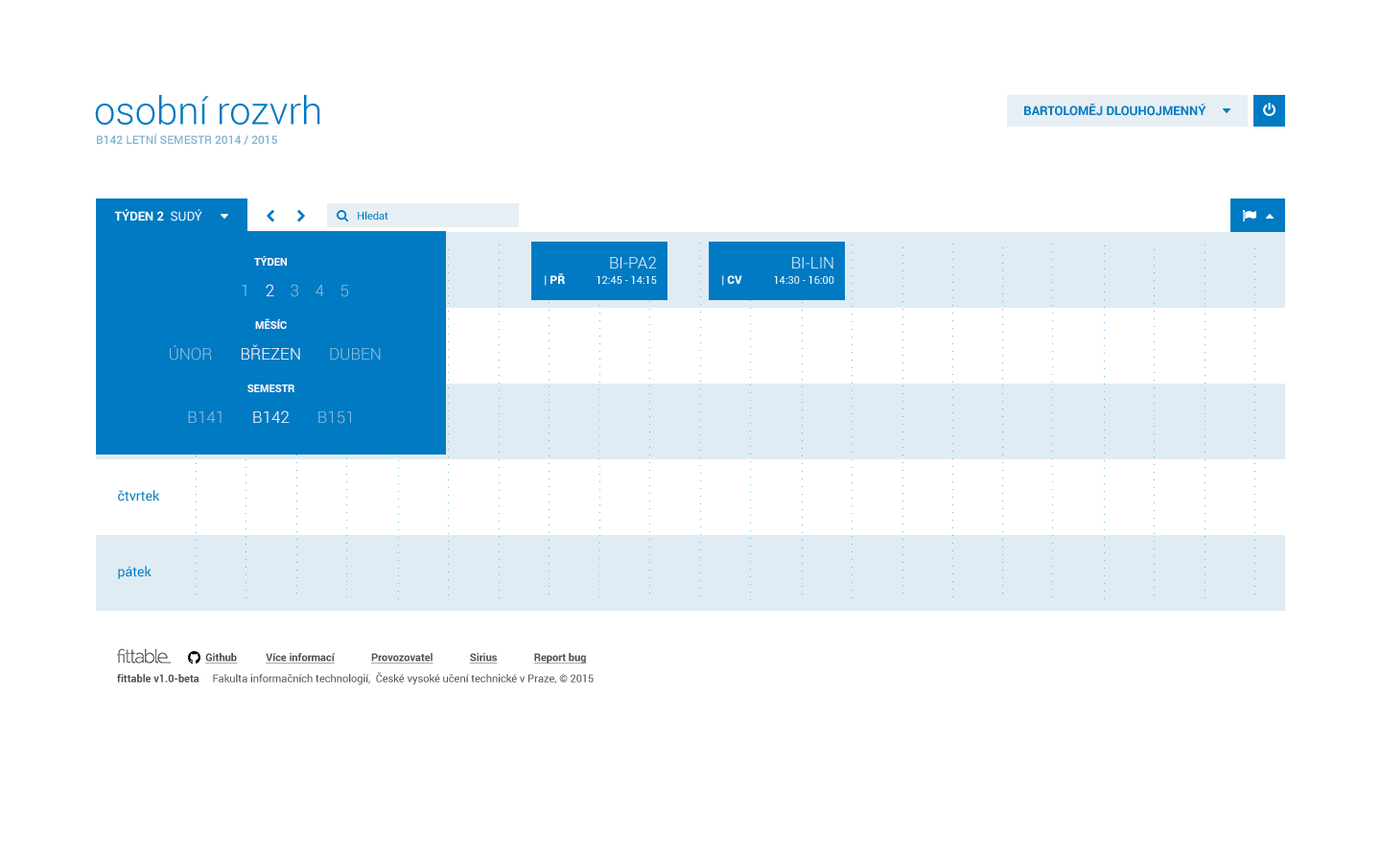
<style>
.page{position:relative;width:1381px;height:863px;background:#ffffff}
.page>*{position:absolute;margin:0}
.t1{font:38.4px "Roboto-Light";color:#007ac2}
.t2{font:12.5px "Roboto-Bold";color:#007ac2}
.t3{font:11.5px "Roboto-Medium";color:#83b3d0}
.t4{font:12.5px "Roboto-Bold";color:#ffffff}
.t5{font:12.5px "Roboto-Regular";color:#ffffff}
.t6{font:10.6px "Roboto-Regular";color:#007ac2}
.t7{font:10.6px/60.4px "Roboto-Bold";color:#ffffff}
.t8{font:16.3px "Roboto-Light";color:#ffffff}
.t9{font:16.3px "Roboto-Light"}
.t10{font:11.5px "Roboto-Black";color:#ffffff}
.t11{font:10.6px "Roboto-Regular";color:#ffffff}
.t12{font:16.3px "Roboto-Light";color:#85c1e4}
.t13{font:13.4px "Roboto-Regular";color:#007ac2}
.t14{font:10.6px "Roboto-Bold";color:#515151;text-decoration:underline}
.t15{font:10.6px "Roboto-Regular";color:#515151}
.t16{font:10.6px "Roboto-Bold";color:#515151}
</style>
<div class="page">
<p class="t1" style="left:95px;top:95px;width:225px;height:30px">osobní rozvrh</p>
<p class="t2" style="left:1024px;top:104px;width:183px;height:12px">BARTOLOMĚJ DLOUHOJMENNÝ</p>
<p class="t3" style="left:97px;top:133px;width:180px;height:12px">B142 LETNÍ SEMESTR 2014 / 2015</p>
<p class="t4" style="left:114px;top:209px;width:88px;height:13px">TÝDEN 2 <span class="t5"> SUDÝ</span></p>
<p class="t6" style="left:358px;top:211px;width:30px;height:9px">Hledat</p>
<p class="t7" style="left:247px;top:256px;width:47px;height:136px;text-align:center">TÝDEN<br>MĚSÍC<br>SEMESTR</p>
<p class="t8" style="left:610px;top:256px;width:47px;height:13px">BI-PA2</p>
<p class="t9" style="left:792px;top:257px;width:42px;height:12px">BI-LIN</p>
<p class="t10" style="left:545px;top:273px;width:20px;height:13px">| PŘ</p>
<p class="t11" style="left:597px;top:276px;width:60px;height:8px">12:45 - 14:15</p>
<p class="t10" style="left:722px;top:275px;width:20px;height:11px">| CV</p>
<p class="t11" style="left:774px;top:276px;width:61px;height:8px">14:30 - 16:00</p>
<p class="t12" style="left:242px;top:284px;width:106px;height:13px">1    <span class="t8">2 </span>   3    4    5</p>
<p class="t8" style="left:170px;top:344px;width:211px;height:17px"><span class="t12">  ÚNOR       </span>BŘEZEN <span class="t12">      DUBEN</span></p>
<p class="t12" style="left:188px;top:411px;width:163px;height:13px">B141<span class="t8">       B142 </span>      B151</p>
<p class="t13" style="left:118px;top:490px;width:42px;height:12px">čtvrtek</p>
<p class="t13" style="left:118px;top:566px;width:34px;height:13px">pátek</p>
<p class="t14" style="left:205px;top:653px;width:382px;height:11px">Github           Více informací              Provozovatel              Sirius              Report bug</p>
<p class="t15" style="left:117px;top:672px;width:477px;height:13px"><span class="t16">fittable v1.0-beta     </span>Fakulta informačních technologií,  České vysoké učení technické v Praze, © 2015</p>
</div>
